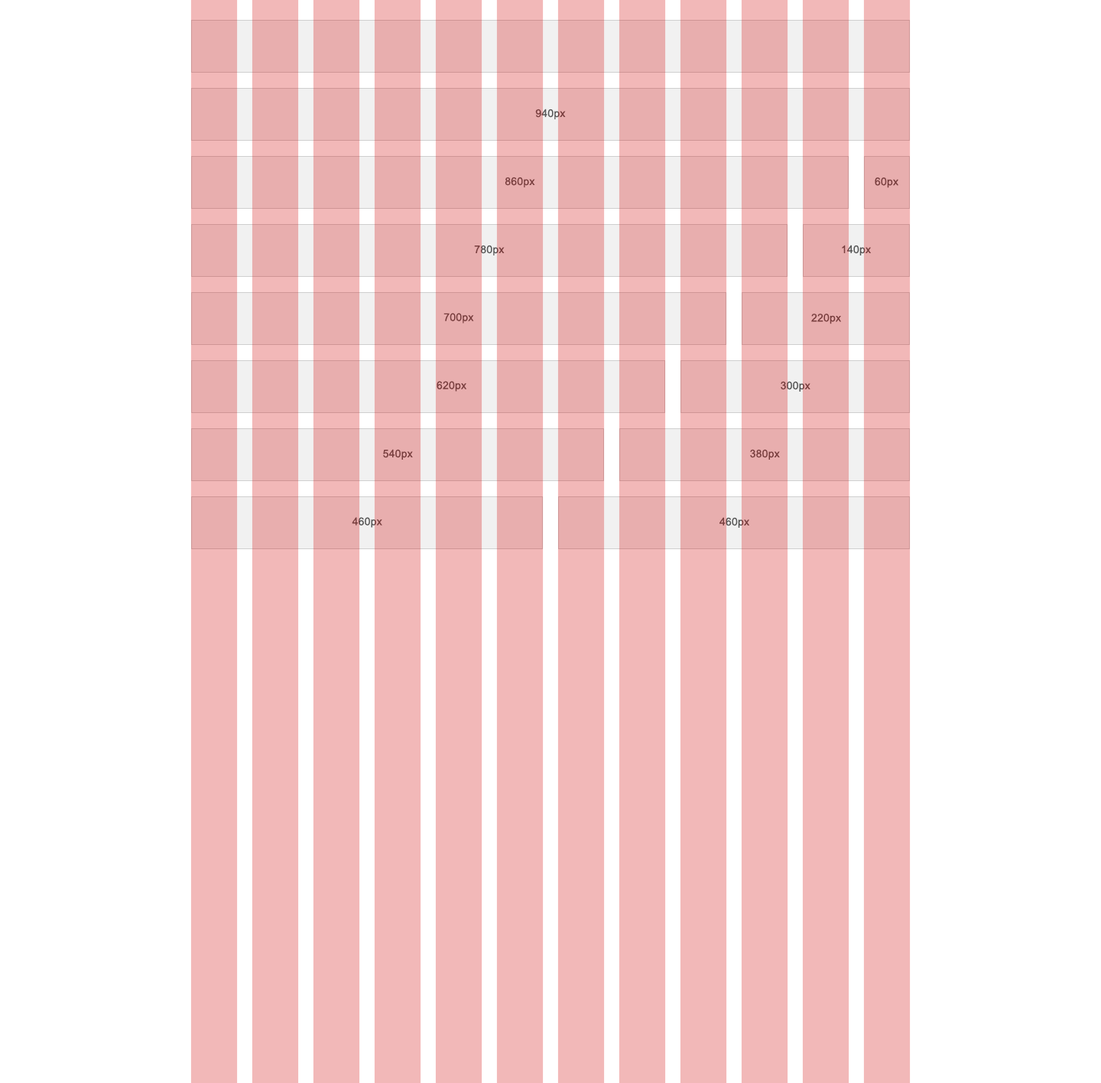
<style>
.page{position:relative;width:1101px;height:1083px;background:#ffffff}
.page>*{position:absolute;margin:0}
.t1{font:10.7px "ArialMT"}
.t2{font:10.7px "ArialMT";color:#773d3d}
.t3{font:10.7px "ArialMT";color:#555555}
.t4{font:10.7px "ArialMT";color:#684848}
</style>
<div class="page">
<p class="t1" style="left:535px;top:109px;width:31px;height:10px">940px</p>
<p class="t2" style="left:505px;top:177px;width:30px;height:10px">860px</p>
<p class="t2" style="left:875px;top:177px;width:24px;height:11px">60px</p>
<p class="t1" style="left:474px;top:245px;width:31px;height:10px">780px</p>
<p class="t3" style="left:842px;top:245px;width:29px;height:10px">140px</p>
<p class="t2" style="left:444px;top:313px;width:30px;height:10px">700px</p>
<p class="t2" style="left:811px;top:314px;width:30px;height:10px">220px</p>
<p class="t2" style="left:437px;top:381px;width:29px;height:11px">620px</p>
<p class="t1" style="left:781px;top:381px;width:30px;height:11px">300px</p>
<p class="t2" style="left:383px;top:449px;width:30px;height:11px">540px</p>
<p class="t2" style="left:750px;top:449px;width:30px;height:11px">380px</p>
<p class="t4" style="left:352px;top:517px;width:30px;height:11px">460px</p>
<p class="t3" style="left:720px;top:517px;width:29px;height:11px">460px</p>
</div>
